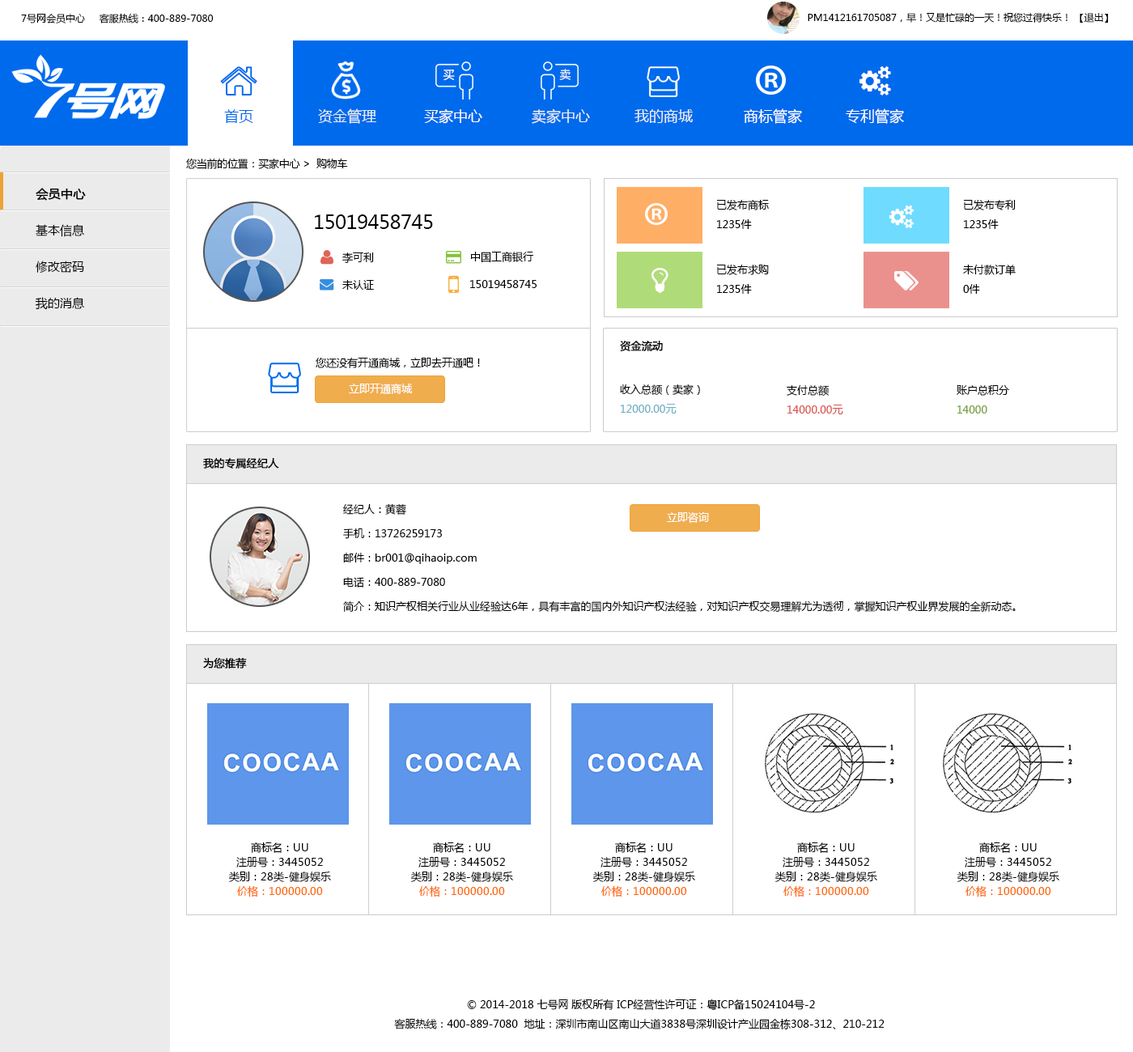
<style>
.page{position:relative;width:1133px;height:1052px;background:#ffffff}
.page>*{position:absolute;margin:0}
.t1{font:9.7px "MicrosoftYaHei";color:#000000}
.t2{font:11.3px "MicrosoftYaHei";color:#ffffff}
.t3{font:11.3px "MicrosoftYaHei";color:#ecf0f1}
.t4{font:14.6px "MicrosoftYaHei";color:#006aed}
.t5{font:14.6px "MicrosoftYaHei";color:#ecf0f1}
.t6{font:14.6px "MicrosoftYaHei";color:#ffffff}
.t7{font:10.5px "MicrosoftYaHei";letter-spacing:-0.02em;color:#000000}
.t8{font:12.1px/36.4px "MicrosoftYaHei";color:#000000}
.t9{font:12.1px/36.4px "MicrosoftYaHei";color:#000000;font-weight:bold}
.t10{font:10.5px/19.4px "MicrosoftYaHei";color:#000000}
.t11{font:19.4px "MicrosoftYaHei";letter-spacing:-0.02em;color:#000000}
.t12{font:10.5px "MicrosoftYaHei";color:#000000}
.t13{font:10.5px "MicrosoftYaHei";color:#000000;font-weight:bold}
.t14{font:10.5px "MicrosoftYaHei";color:#ffffff}
.t15{font:10.5px/19.4px "MicrosoftYaHei";color:#70afc4}
.t16{font:10.5px/19.4px "MicrosoftYaHei";color:#d9534f}
.t17{font:10.5px/19.4px "MicrosoftYaHei";color:#73a039}
.t18{font:10.5px/24.3px "MicrosoftYaHei";color:#000000}
.t19{font:10.5px/14.6px "MicrosoftYaHei";color:#000000}
.t20{font:10.5px/14.6px "MicrosoftYaHei";color:#ff6600}
</style>
<div class="page">
<p class="t1" style="left:21px;top:13px;width:193px;height:10px">7号网会员中心     客服热线：400-889-7080</p>
<p class="t1" style="left:808px;top:13px;width:301px;height:10px">PM1412161705087，早！又是忙碌的一天！祝您过得快乐！ 【退出】</p>
<p class="t2" style="left:443px;top:70px;width:12px;height:11px">买</p>
<p class="t3" style="left:559px;top:69px;width:12px;height:11px">卖</p>
<p class="t4" style="left:224px;top:109px;width:29px;height:14px">首页</p>
<p class="t5" style="left:318px;top:108px;width:58px;height:16px">资金管理</p>
<p class="t6" style="left:424px;top:108px;width:58px;height:16px">买家中心</p>
<p class="t5" style="left:532px;top:108px;width:58px;height:16px">卖家中心</p>
<p class="t5" style="left:635px;top:109px;width:58px;height:14px">我的商城</p>
<p class="t6" style="left:744px;top:108px;width:58px;height:16px">商标管家</p>
<p class="t6" style="left:846px;top:108px;width:58px;height:16px">专利管家</p>
<p class="t7" style="left:186px;top:158px;width:162px;height:11px">您当前的位置：买家中心 &gt;  购物车</p>
<p class="t8" style="left:35px;top:188px;width:51px;height:122px"><span class="t9">会员中心<br></span>基本信息<br>修改密码<br>我的消息</p>
<p class="t10" style="left:717px;top:199px;width:52px;height:30px">已发布商标<br>1235件</p>
<p class="t10" style="left:964px;top:199px;width:52px;height:30px">已发布专利<br>1235件</p>
<p class="t11" style="left:315px;top:214px;width:118px;height:15px">15019458745</p>
<p class="t12" style="left:342px;top:253px;width:32px;height:10px">李可利</p>
<p class="t12" style="left:471px;top:252px;width:62px;height:11px">中国工商银行</p>
<p class="t10" style="left:717px;top:264px;width:52px;height:30px">已发布求购<br>1235件</p>
<p class="t10" style="left:963px;top:265px;width:53px;height:29px">未付款订单<br>0件</p>
<p class="t12" style="left:342px;top:280px;width:32px;height:10px">未认证</p>
<p class="t12" style="left:470px;top:280px;width:67px;height:8px">15019458745</p>
<p class="t13" style="left:620px;top:341px;width:43px;height:11px">资金流动</p>
<p class="t12" style="left:316px;top:357px;width:164px;height:11px">您还没有开通商城，立即去开通吧！</p>
<p class="t14" style="left:349px;top:384px;width:63px;height:10px">立即开通商城</p>
<p class="t15" style="left:620px;top:384px;width:80px;height:30px"><span class="t10">收入总额（卖家）<br></span>12000.00元</p>
<p class="t16" style="left:787px;top:385px;width:56px;height:29px"><span class="t10">支付总额<br></span>14000.00元</p>
<p class="t10" style="left:957px;top:385px;width:53px;height:29px">账户总积分<br><span class="t17">14000</span></p>
<p class="t13" style="left:203px;top:458px;width:76px;height:11px">我的专属经纪人</p>
<p class="t18" style="left:343px;top:503px;width:673px;height:110px">经纪人：黄蓉<br>手机：13726259173<br>邮件：br001@qihaoip.com<br>电话：400-889-7080<br>简介：知识产权相关行业从业经验达6年，具有丰富的国内外知识产权法经验，对知识产权交易理解尤为透彻，掌握知识产权业界发展的全新动态。</p>
<p class="t14" style="left:667px;top:512px;width:42px;height:11px">立即咨询</p>
<p class="t13" style="left:203px;top:657px;width:44px;height:12px">为您推荐</p>
<p class="t19" style="left:229px;top:843px;width:102px;height:55px;text-align:center">商标名：UU<br>注册号：3445052<br>类别：28类-健身娱乐<br><span class="t20">价格：100000.00</span></p>
<p class="t19" style="left:411px;top:843px;width:102px;height:55px;text-align:center">商标名：UU<br>注册号：3445052<br>类别：28类-健身娱乐<br><span class="t20">价格：100000.00</span></p>
<p class="t19" style="left:593px;top:843px;width:102px;height:55px;text-align:center">商标名：UU<br>注册号：3445052<br>类别：28类-健身娱乐<br><span class="t20">价格：100000.00</span></p>
<p class="t19" style="left:775px;top:843px;width:102px;height:55px;text-align:center">商标名：UU<br>注册号：3445052<br>类别：28类-健身娱乐<br><span class="t20">价格：100000.00</span></p>
<p class="t19" style="left:958px;top:843px;width:102px;height:55px;text-align:center">商标名：UU<br>注册号：3445052<br>类别：28类-健身娱乐<br><span class="t20">价格：100000.00</span></p>
<p class="t10" style="left:394px;top:999px;width:491px;height:31px;text-align:center">© 2014-2018 七号网 版权所有 ICP经营性许可证：粤ICP备15024104号-2<br>客服热线：400-889-7080  地址：深圳市南山区南山大道3838号深圳设计产业园金栋308-312、210-212</p>
</div>
